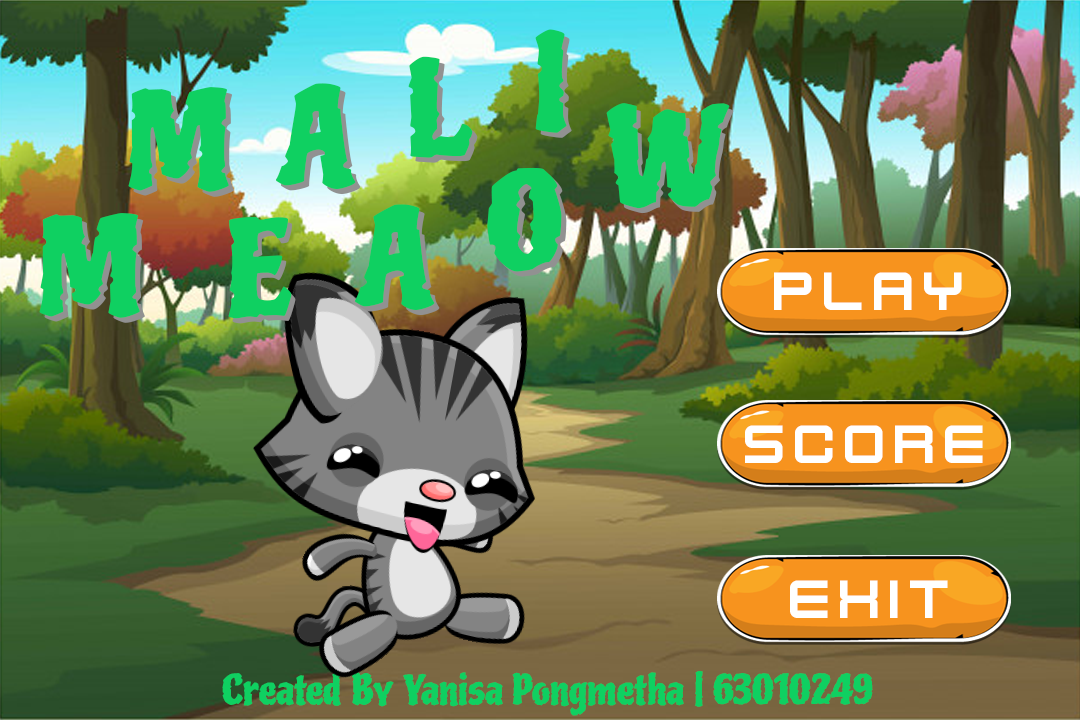
<style>
.page{position:relative;width:1080px;height:720px}
.page>*{position:absolute;margin:0}
.t1{font:130px "Piedra-Regular";color:#0fd061}
.t2{font:60px "KenVector-Future";color:#ffffff}
.t3{font:40px "Piedra-Regular";color:#0fd061}
</style>
<div class="page">
<p class="t1" style="left:535px;top:29px;width:32px;height:104px">I</p>
<p class="t1" style="left:408px;top:56px;width:65px;height:102px">L</p>
<p class="t1" style="left:413px;top:61px;width:65px;height:102px">L</p>
<p class="t1" style="left:128px;top:87px;width:101px;height:105px">M</p>
<p class="t1" style="left:276px;top:83px;width:80px;height:106px">A</p>
<p class="t1" style="left:281px;top:88px;width:80px;height:106px">A</p>
<p class="t1" style="left:133px;top:92px;width:101px;height:105px">M</p>
<p class="t1" style="left:606px;top:103px;width:124px;height:106px">W</p>
<p class="t1" style="left:610px;top:108px;width:124px;height:106px">W</p>
<p class="t1" style="left:487px;top:167px;width:75px;height:105px">O</p>
<p class="t1" style="left:492px;top:172px;width:75px;height:105px">O</p>
<p class="t1" style="left:355px;top:204px;width:80px;height:106px">A</p>
<p class="t1" style="left:360px;top:209px;width:80px;height:106px">A</p>
<p class="t1" style="left:39px;top:213px;width:101px;height:105px">M</p>
<p class="t1" style="left:44px;top:218px;width:101px;height:105px">M</p>
<p class="t1" style="left:228px;top:217px;width:64px;height:102px">E</p>
<p class="t1" style="left:232px;top:222px;width:64px;height:102px">E</p>
<p class="t2" style="left:774px;top:272px;width:188px;height:38px">PLAY</p>
<p class="t2" style="left:745px;top:425px;width:238px;height:38px">SCORE</p>
<p class="t2" style="left:790px;top:580px;width:158px;height:38px">EXIT</p>
<p class="t3" style="left:222px;top:671px;width:651px;height:45px">Created By Yanisa Pongmetha | 63010249</p>
</div>
